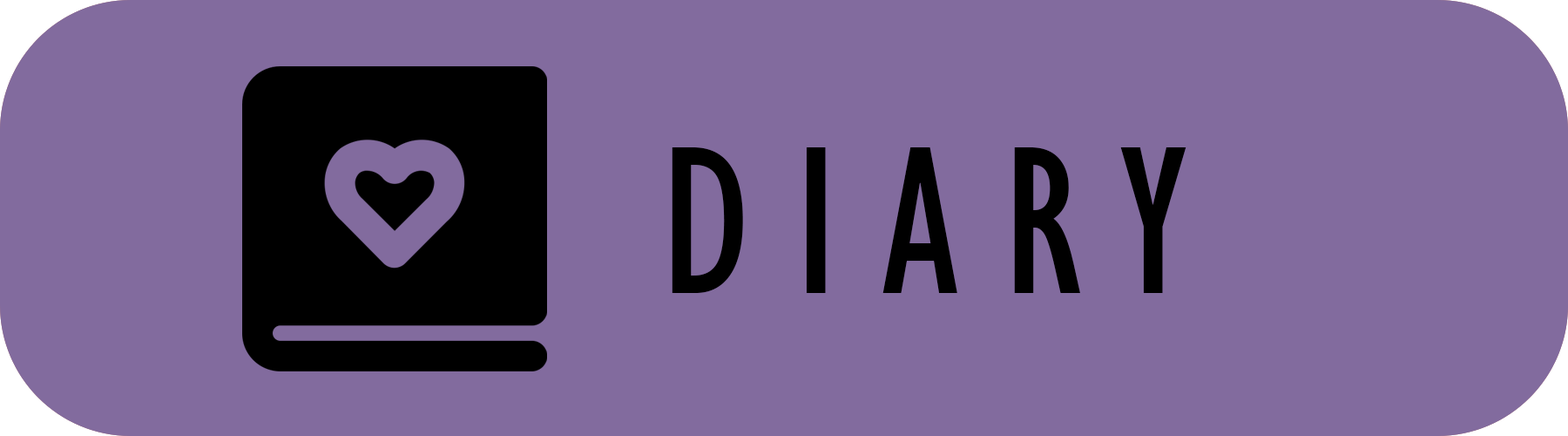
<style>
.page{position:relative;width:1568px;height:436px;background:#826b9e}
.page>*{position:absolute;margin:0}
.t1{font:217.8px "GillSansMT-Condensed";letter-spacing:0.2em;color:#000000}
</style>
<div class="page">
<p class="t1" style="left:672px;top:147px;width:514px;height:146px">DIARY</p>
</div>
